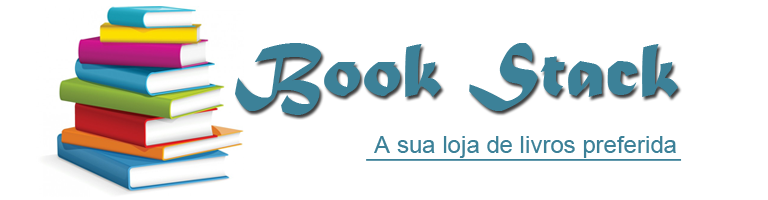
<style>
.page{position:relative;width:768px;height:200px;background:#ffffff}
.page>*{position:absolute;margin:0}
.t1{font:80px "MaturaMTScriptCapitals";color:#3c8198}
.t2{font:24px "ArialMT";color:#3c8198}
</style>
<div class="page">
<p class="t1" style="left:235px;top:43px;width:443px;height:72px">Book Stack</p>
<p class="t2" style="left:374px;top:136px;width:302px;height:22px">A sua loja de livros preferida</p>
</div>
